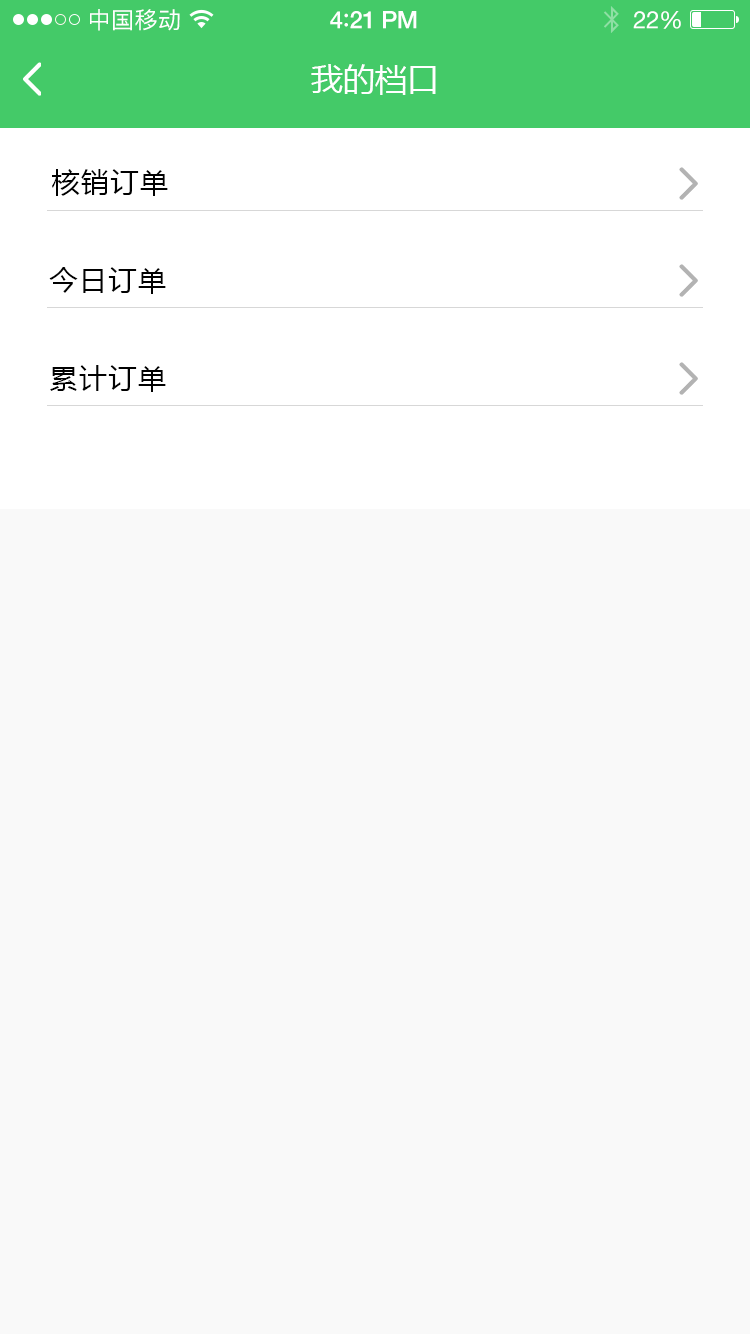
<style>
.page{position:relative;width:750px;height:1334px;background:#f9f9f9}
.page>*{position:absolute;margin:0}
.t1{font:23px "PingFangSC-Regular";letter-spacing:0.02em;color:#ffffff}
.t2{font:24px "HelveticaNeue-Medium";letter-spacing:-0.02em;color:#ffffff}
.t3{font:26px "Avenir-Medium";letter-spacing:-0.02em;color:#ffffff}
.t4{font:24px "HelveticaNeue";letter-spacing:-0.02em;color:#ffffff}
.t5{font:32px "MicrosoftYaHei";color:#ffffff;text-transform:uppercase}
.t6{font:28px "MicrosoftYaHei";letter-spacing:0.05em;color:#010101;text-transform:uppercase}
</style>
<div class="page">
<p class="t1" style="left:90px;top:9px;width:90px;height:22px">中国移动</p>
<p class="t2" style="left:330px;top:11px;width:87px;height:18px">4<span class="t3">:</span>21 PM</p>
<p class="t4" style="left:633px;top:11px;width:48px;height:18px">22%</p>
<p class="t5" style="left:311px;top:64px;width:125px;height:31px">我的档口</p>
<p class="t6" style="left:52px;top:169px;width:116px;height:27px">核销订单</p>
<p class="t6" style="left:49px;top:267px;width:117px;height:27px">今日订单</p>
<p class="t6" style="left:50px;top:365px;width:116px;height:27px">累计订单</p>
</div>
